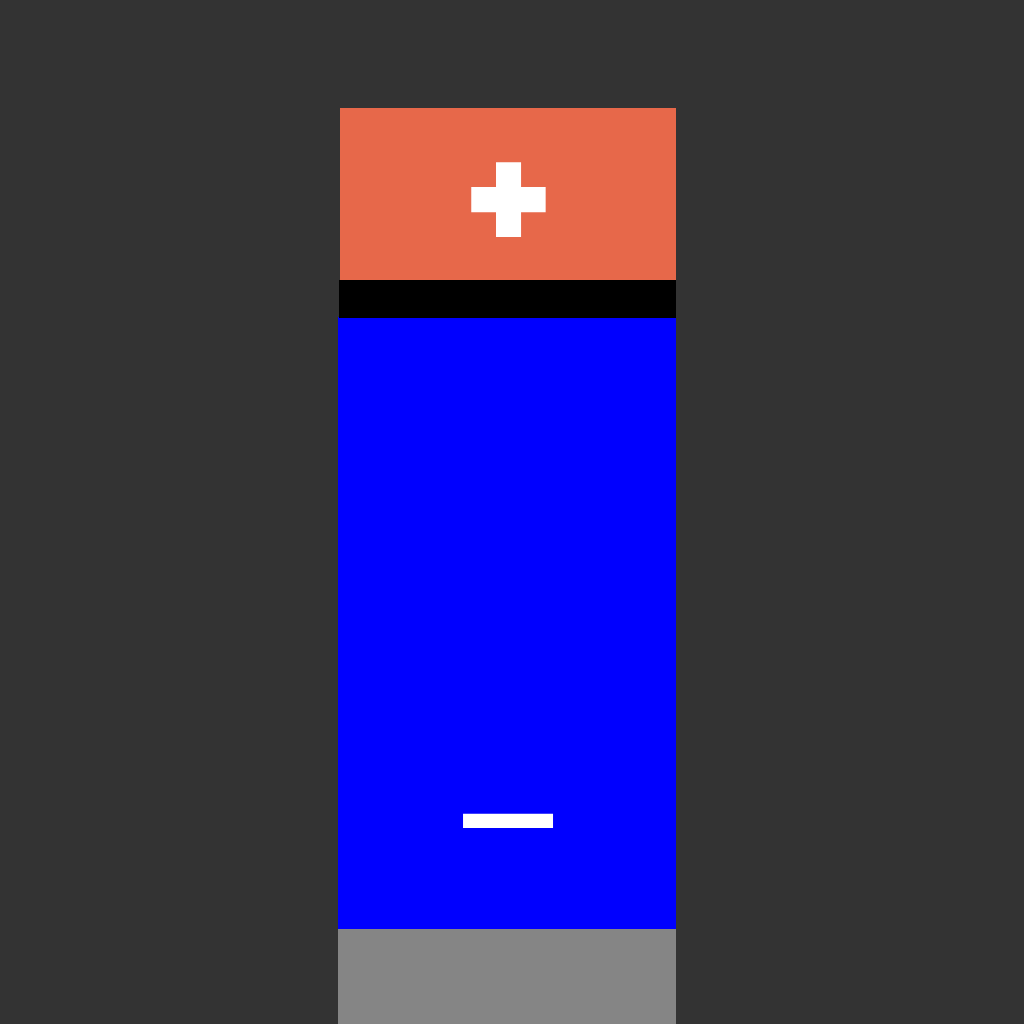
<style>
.page{position:relative;width:1024px;height:1024px;background:#333333}
.page>*{position:absolute;margin:0}
.t1{font:150px "AlfaSlabOne-Regular";color:#ffffff}
</style>
<div class="page">
<p class="t1" style="left:471px;top:162px;width:75px;height:75px">+</p>
<p class="t1" style="left:463px;top:813px;width:91px;height:15px">_</p>
</div>
